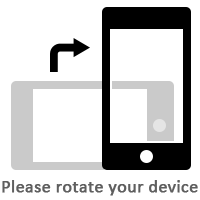
<style>
.page{position:relative;width:200px;height:200px;background:#ffffff}
.page>*{position:absolute;margin:0}
.t1{font:18px "Calibri";color:#5f5f5f;font-weight:bold}
</style>
<div class="page">
<p class="t1" style="left:2px;top:180px;width:196px;height:16px">Please rotate your device</p>
</div>
